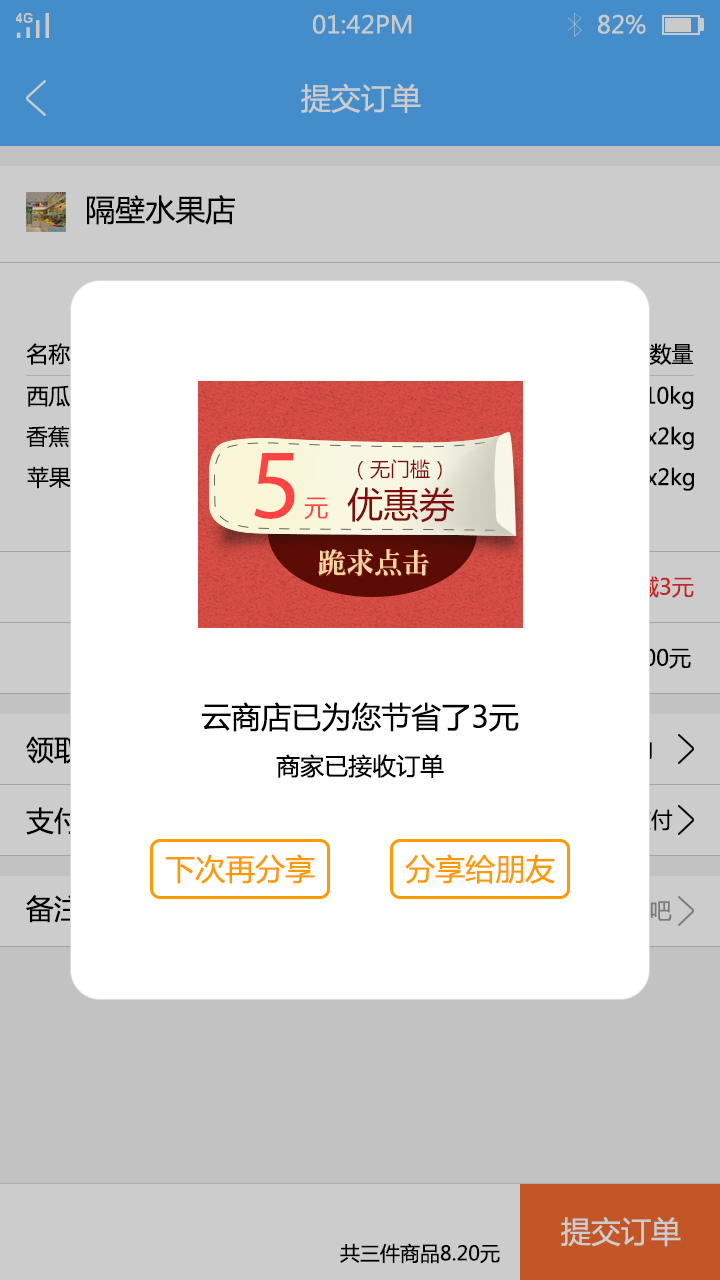
<style>
.page{position:relative;width:720px;height:1280px;background:#ffffff}
.page>*{position:absolute;margin:0}
.t1{font:24px "MicrosoftYaHei";color:#c9caca}
.t2{font:30px "MicrosoftYaHei";color:#cccccc}
.t3{font:30px "MicrosoftYaHei";color:#030303}
.t4{font:22px "MicrosoftYaHei";color:#030303}
.t5{font:22px "MicrosoftYaHei"}
.t6{font:30px "MicrosoftYaHei";color:#010101}
.t7{font:28px "MicrosoftYaHei"}
.t8{font:24px "MicrosoftYaHei";color:#010101}
.t9{font:30px "MicrosoftYaHei";color:#ff9900}
.t10{font:20px "MicrosoftYaHei";color:#000000}
</style>
<div class="page">
<p class="t1" style="left:313px;top:14px;width:99px;height:20px">01:42PM</p>
<p class="t1" style="left:598px;top:14px;width:48px;height:20px">82%</p>
<p class="t2" style="left:301px;top:83px;width:120px;height:30px">提交订单</p>
<p class="t3" style="left:87px;top:195px;width:148px;height:30px">隔壁水果店</p>
<p class="t4" style="left:26px;top:343px;width:44px;height:22px">名称</p>
<p class="t4" style="left:649px;top:343px;width:44px;height:22px">数量</p>
<p class="t4" style="left:27px;top:385px;width:44px;height:22px">西瓜</p>
<p class="t4" style="left:632px;top:386px;width:62px;height:24px">x10kg</p>
<p class="t4" style="left:26px;top:426px;width:44px;height:22px">香蕉</p>
<p class="t4" style="left:646px;top:426px;width:48px;height:24px">x2kg</p>
<p class="t4" style="left:27px;top:466px;width:44px;height:23px">苹果</p>
<p class="t4" style="left:646px;top:467px;width:48px;height:24px">x2kg</p>
<p class="t5" style="left:616px;top:576px;width:78px;height:22px">已减3元</p>
<p class="t6" style="left:201px;top:702px;width:318px;height:30px">云商店已为您节省了3元</p>
<p class="t7" style="left:26px;top:736px;width:111px;height:28px">领取时间</p>
<p class="t8" style="left:276px;top:754px;width:168px;height:24px">商家已接收订单</p>
<p class="t7" style="left:26px;top:807px;width:112px;height:28px">支付方式</p>
<p class="t9" style="left:165px;top:854px;width:150px;height:30px">下次再分享</p>
<p class="t9" style="left:405px;top:854px;width:150px;height:30px">分享给朋友</p>
<p class="t7" style="left:26px;top:895px;width:124px;height:28px">备注/发票</p>
<p class="t2" style="left:561px;top:1217px;width:120px;height:30px">提交订单</p>
<p class="t10" style="left:340px;top:1243px;width:160px;height:21px">共三件商品8.20元</p>
</div>
